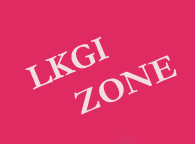
<style>
.page{position:relative;width:195px;height:144px;background:#e02b62}
.page>*{position:absolute;margin:0}
.t1{font:35px "Garamond-Bold";color:#f0dee4}
.t2{font:35px "FelixTitlingMT";color:#f0dee4}
</style>
<div class="page">
<p class="t1" style="left:25px;top:36px;width:152px;height:79px;rotate:-23deg">LKGI<br>    ZONE<br><br><span class="t2">ZONE</span></p>
</div>
